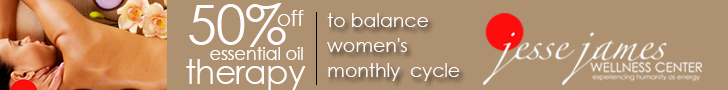
<style>
.page{position:relative;width:728px;height:90px;background:#ae9171}
.page>*{position:absolute;margin:0}
.t1{font:54.4px "CenturyGothic";letter-spacing:-0.02em;color:#fffdfd}
.t2{font:21.8px "CenturyGothic";letter-spacing:-0.02em;color:#fffdfd}
.t3{font:19.4px/12.5px "CenturyGothic";letter-spacing:-0.02em;color:#fffdfd}
.t4{font:18.1px "CenturyGothic";letter-spacing:-0.02em;color:#fffdfd}
.t5{font:32.6px "CenturyGothic";letter-spacing:-0.02em;color:#fffdfd}
</style>
<div class="page">
<p class="t1" style="left:189px;top:3px;width:97px;height:44px">50%</p>
<p class="t2" style="left:277px;top:10px;width:27px;height:16px">off</p>
<p class="t3" style="left:327px;top:13px;width:133px;height:68px">to balance <br><br>women's <br><br>monthly  cycle</p>
<p class="t4" style="left:210px;top:47px;width:93px;height:13px">essential oil</p>
<p class="t5" style="left:186px;top:59px;width:120px;height:31px">therapy</p>
</div>
